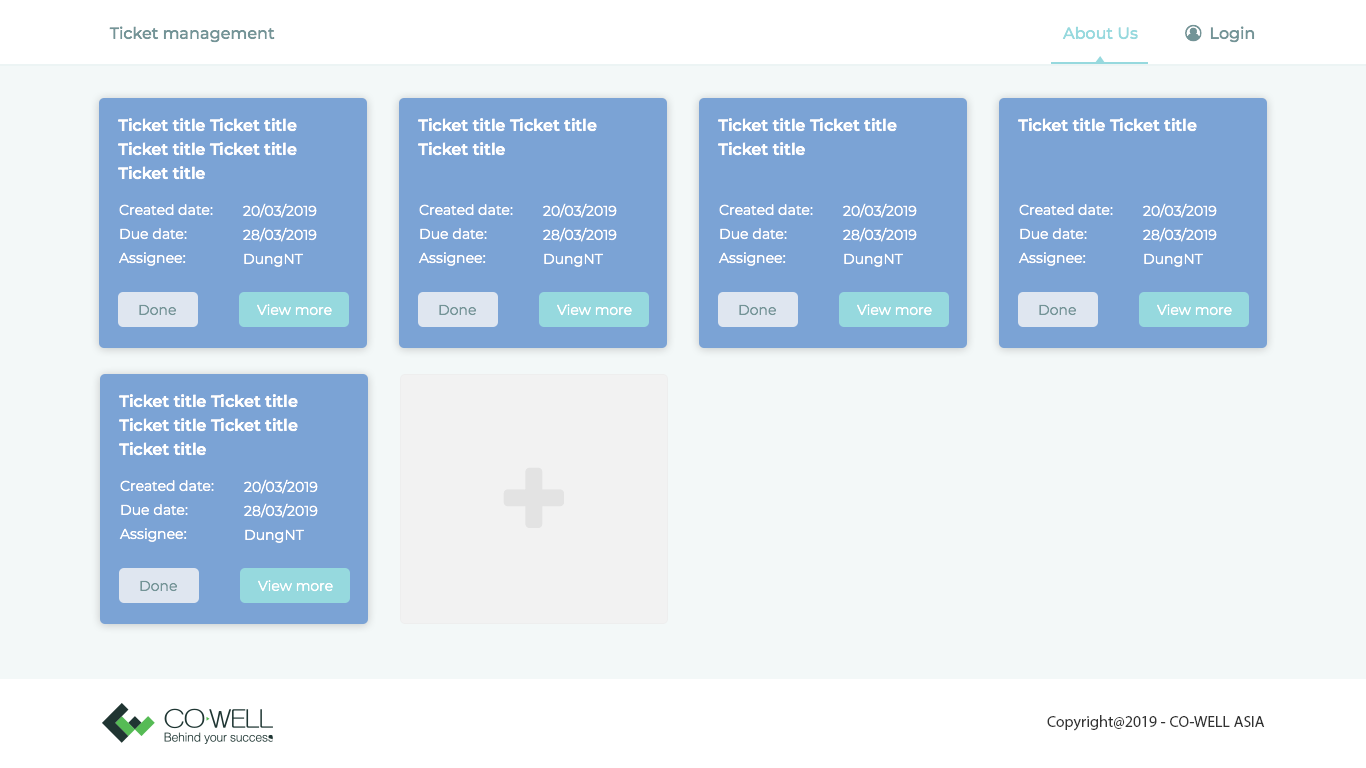
<style>
.page{position:relative;width:1366px;height:768px;background:#f3f8f8}
.page>*{position:absolute;margin:0}
.t1{font:16px "Montserrat-Medium";color:#739497}
.t2{font:16px/24px "Montserrat-SemiBold";color:#ffffff}
.t3{font:16px "Montserrat-SemiBold";color:#ffffff}
.t4{font:14px/24px "Montserrat-Regular";color:#ffffff}
.t5{font:14px "Montserrat-Regular";color:#739497}
.t6{font:14px "Montserrat-Regular";color:#ffffff}
.t7{font:16px "MyriadPro-Regular";color:#333333}
</style>
<div class="page">
<p class="t1" style="left:109px;top:26px;width:166px;height:17px">Ticket management</p>
<p class="t2" style="left:118px;top:118px;width:179px;height:62px">Ticket title Ticket title Ticket title Ticket title Ticket title</p>
<p class="t2" style="left:418px;top:118px;width:179px;height:38px">Ticket title Ticket title Ticket title</p>
<p class="t2" style="left:718px;top:118px;width:179px;height:38px">Ticket title Ticket title Ticket title</p>
<p class="t3" style="left:1018px;top:118px;width:179px;height:14px">Ticket title Ticket title</p>
<p class="t4" style="left:119px;top:204px;width:94px;height:62px">Created date:<br>Due date:<br>Assignee:</p>
<p class="t4" style="left:243px;top:203px;width:74px;height:64px">20/03/2019<br>28/03/2019<br>DungNT</p>
<p class="t4" style="left:418px;top:204px;width:95px;height:62px">Created date:<br>Due date:<br>Assignee:</p>
<p class="t4" style="left:543px;top:203px;width:74px;height:64px">20/03/2019<br>28/03/2019<br>DungNT</p>
<p class="t4" style="left:718px;top:204px;width:95px;height:62px">Created date:<br>Due date:<br>Assignee:</p>
<p class="t4" style="left:843px;top:203px;width:74px;height:64px">20/03/2019<br>28/03/2019<br>DungNT</p>
<p class="t4" style="left:1018px;top:204px;width:95px;height:62px">Created date:<br>Due date:<br>Assignee:</p>
<p class="t4" style="left:1143px;top:203px;width:74px;height:64px">20/03/2019<br>28/03/2019<br>DungNT</p>
<p class="t5" style="left:139px;top:304px;width:37px;height:12px">Done</p>
<p class="t6" style="left:257px;top:304px;width:75px;height:12px">View more</p>
<p class="t5" style="left:439px;top:304px;width:37px;height:12px">Done</p>
<p class="t6" style="left:557px;top:304px;width:75px;height:12px">View more</p>
<p class="t5" style="left:739px;top:304px;width:37px;height:12px">Done</p>
<p class="t6" style="left:857px;top:304px;width:75px;height:12px">View more</p>
<p class="t5" style="left:1039px;top:304px;width:37px;height:12px">Done</p>
<p class="t6" style="left:1157px;top:304px;width:75px;height:12px">View more</p>
<p class="t2" style="left:119px;top:394px;width:179px;height:62px">Ticket title Ticket title Ticket title Ticket title Ticket title</p>
<p class="t4" style="left:119px;top:480px;width:95px;height:62px">Created date:<br>Due date:<br>Assignee:</p>
<p class="t4" style="left:244px;top:479px;width:74px;height:64px">20/03/2019<br>28/03/2019<br>DungNT</p>
<p class="t5" style="left:140px;top:580px;width:37px;height:12px">Done</p>
<p class="t6" style="left:258px;top:580px;width:75px;height:12px">View more</p>
<p class="t7" style="left:1047px;top:715px;width:218px;height:16px">Copyright@2019 - CO-WELL ASIA</p>
</div>
